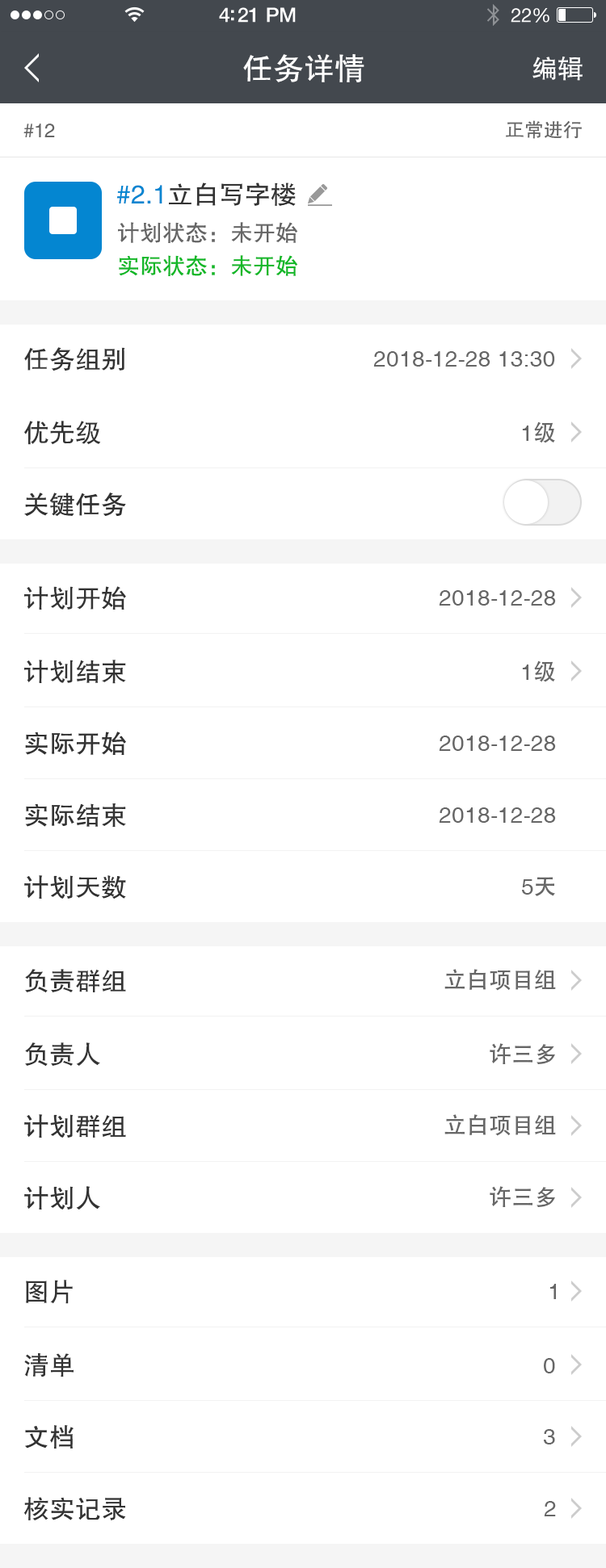
<style>
.page{position:relative;width:606px;height:1568px;background:#ffffff}
.page>*{position:absolute;margin:0}
.t1{font:30.7px "FZHTJW--GB1-0";color:#ffffff}
.t2{font:25.8px "FZHTJW--GB1-0";color:#ffffff}
.t3{font:19.4px "FZHTJW--GB1-0";color:#666666}
.t4{font:25.8px "FZHTJW--GB1-0";color:#333333}
.t5{font:25.8px "FZHTJW--GB1-0";color:#0486d1}
.t6{font:22.6px "FZHTJW--GB1-0";color:#666666}
.t7{font:22.6px "FZHTJW--GB1-0";color:#12b828}
.t8{font:25.9px "FZHTJW--GB1-0";color:#333333}
.t9{font:22.6px "Helvetica";color:#666666}
.t10{font:22.6px "AdobeHeitiStd-Regular";color:#666666}
</style>
<div class="page">
<p class="t1" style="left:243px;top:54px;width:121px;height:28px">任务详情</p>
<p class="t2" style="left:532px;top:57px;width:50px;height:24px">编辑</p>
<p class="t3" style="left:23px;top:124px;width:32px;height:13px">#12</p>
<p class="t3" style="left:505px;top:120px;width:76px;height:19px">正常进行</p>
<p class="t4" style="left:116px;top:182px;width:180px;height:24px"><span class="t5">#2.1</span>立白写字楼</p>
<p class="t6" style="left:118px;top:222px;width:180px;height:21px">计划状态：未开始</p>
<p class="t7" style="left:119px;top:255px;width:179px;height:21px">实际状态：未开始</p>
<p class="t8" style="left:24px;top:347px;width:101px;height:24px">任务组别</p>
<p class="t9" style="left:373px;top:351px;width:182px;height:16px">2018-12-28 13:30</p>
<p class="t8" style="left:24px;top:421px;width:77px;height:24px">优先级</p>
<p class="t9" style="left:522px;top:421px;width:33px;height:22px">1<span class="t10">级</span></p>
<p class="t4" style="left:24px;top:493px;width:102px;height:23px">关键任务</p>
<p class="t8" style="left:24px;top:586px;width:102px;height:24px">计划开始</p>
<p class="t9" style="left:438px;top:590px;width:118px;height:16px">2018-12-28</p>
<p class="t8" style="left:24px;top:660px;width:102px;height:24px">计划结束</p>
<p class="t9" style="left:522px;top:660px;width:33px;height:22px">1<span class="t10">级</span></p>
<p class="t4" style="left:25px;top:732px;width:101px;height:23px">实际开始</p>
<p class="t9" style="left:438px;top:736px;width:118px;height:15px">2018-12-28</p>
<p class="t4" style="left:25px;top:803px;width:101px;height:25px">实际结束</p>
<p class="t9" style="left:438px;top:807px;width:118px;height:16px">2018-12-28</p>
<p class="t4" style="left:24px;top:875px;width:102px;height:24px">计划天数</p>
<p class="t9" style="left:522px;top:877px;width:33px;height:19px">5<span class="t10">天</span></p>
<p class="t8" style="left:25px;top:969px;width:101px;height:24px">负责群组</p>
<p class="t10" style="left:444px;top:969px;width:112px;height:22px">立白项目组</p>
<p class="t8" style="left:25px;top:1042px;width:75px;height:25px">负责人</p>
<p class="t10" style="left:489px;top:1043px;width:66px;height:21px">许三多</p>
<p class="t4" style="left:24px;top:1114px;width:102px;height:24px">计划群组</p>
<p class="t10" style="left:444px;top:1114px;width:112px;height:22px">立白项目组</p>
<p class="t4" style="left:24px;top:1186px;width:76px;height:24px">计划人</p>
<p class="t10" style="left:489px;top:1186px;width:66px;height:21px">许三多</p>
<p class="t8" style="left:26px;top:1280px;width:47px;height:24px">图片</p>
<p class="t9" style="left:549px;top:1284px;width:7px;height:15px">1</p>
<p class="t8" style="left:24px;top:1353px;width:49px;height:24px">清单</p>
<p class="t9" style="left:543px;top:1358px;width:12px;height:15px">0</p>
<p class="t4" style="left:25px;top:1425px;width:48px;height:24px">文档</p>
<p class="t9" style="left:543px;top:1429px;width:12px;height:15px">3</p>
<p class="t4" style="left:24px;top:1497px;width:102px;height:23px">核实记录</p>
<p class="t9" style="left:543px;top:1501px;width:13px;height:15px">2</p>
</div>
